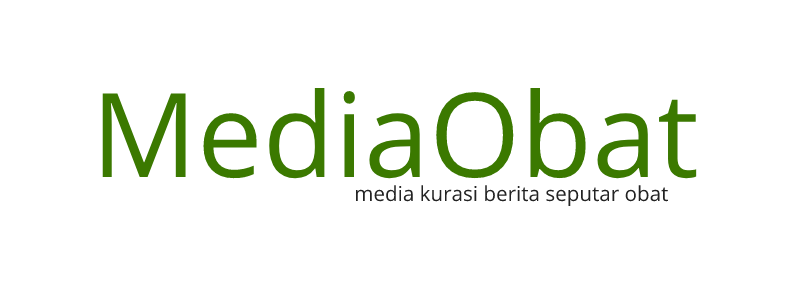
<style>
.page{position:relative;width:798px;height:295px;background:#ffffff}
.page>*{position:absolute;margin:0}
.t1{font:117.1px "OpenSans-Regular";color:#3b7900}
.t2{font:20.6px "OpenSans-Regular";color:#232323}
</style>
<div class="page">
<p class="t1" style="left:102px;top:88px;width:595px;height:91px">MediaObat</p>
<p class="t2" style="left:356px;top:185px;width:312px;height:21px">media kurasi berita seputar obat</p>
</div>
